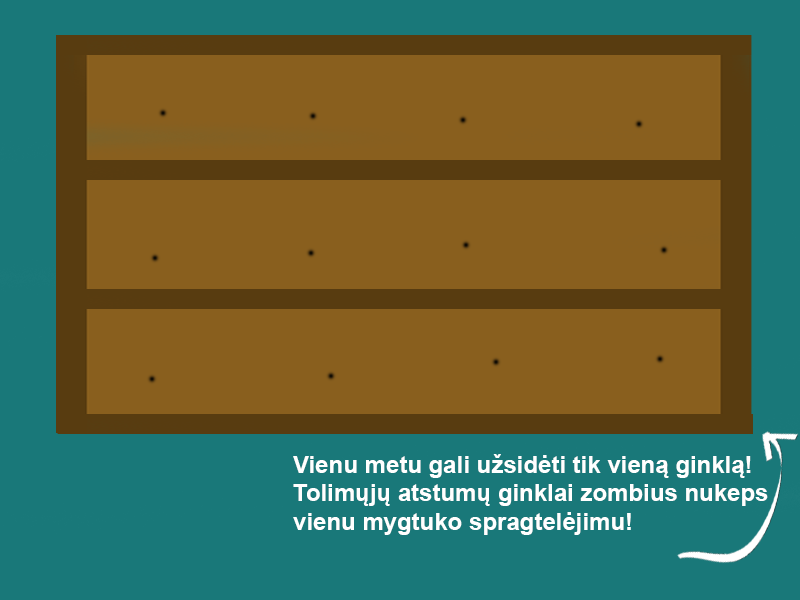
<style>
.page{position:relative;width:800px;height:600px;background:#197879}
.page>*{position:absolute;margin:0}
.t1{font:24px "Arial-BoldMT";color:#ffffff}
</style>
<div class="page">
<p class="t1" style="left:293px;top:454px;width:475px;height:81px;text-align:right">Vienu metu gali užsidėti tik vieną ginklą!<br>Tolimųjų atstumų ginklai zombius nukeps vienu mygtuko spragtelėjimu!</p>
</div>
